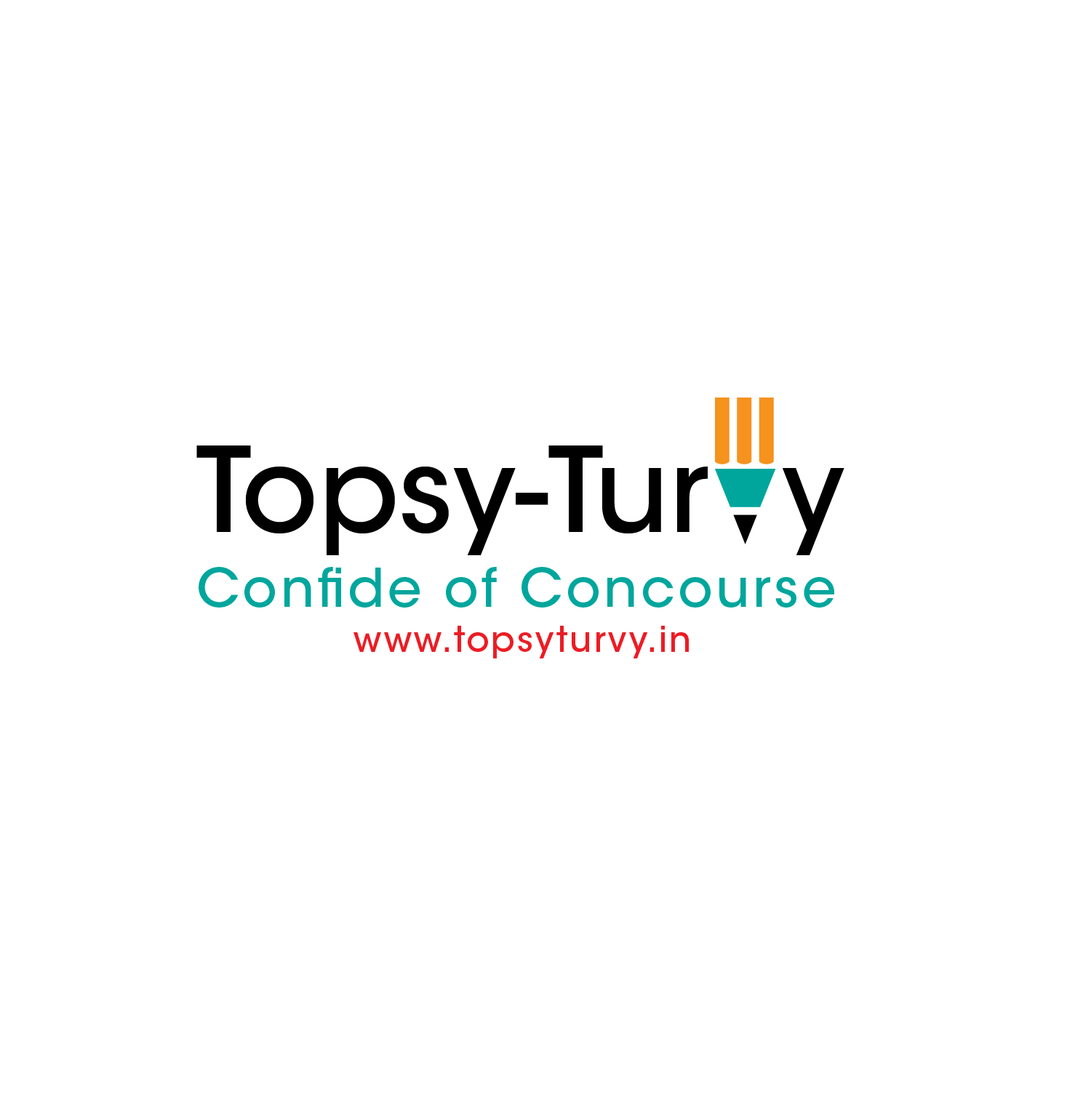
<style>
.page{position:relative;width:1091px;height:1093px;background:#ffffff}
.page>*{position:absolute;margin:0}
.t1{font:117px "ITCAvantGardeStd-Md";color:#000000}
.t2{font:53.2px "ITCAvantGardeStd-Md";letter-spacing:0.06em;color:#00a69c}
.t3{font:34.8px "ITCAvantGardeStd-Md";letter-spacing:0.06em;color:#ec1c24}
</style>
<div class="page">
<p class="t1" style="left:196px;top:446px;width:648px;height:109px">Topsy-Tur  y</p>
<p class="t2" style="left:198px;top:567px;width:636px;height:41px">Confide of Concourse</p>
<p class="t3" style="left:353px;top:626px;width:335px;height:33px">www.topsyturvy.in</p>
</div>
